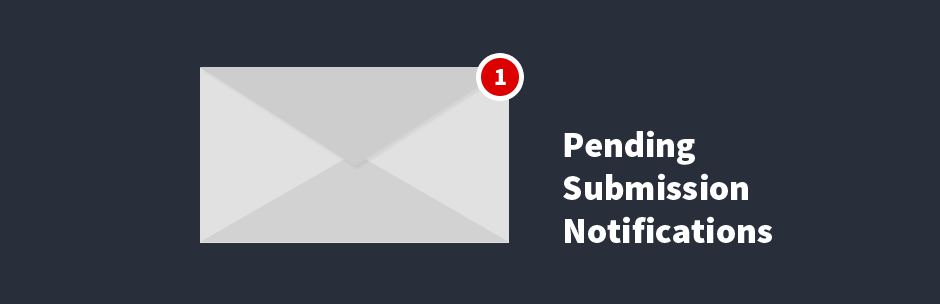
<style>
.page{position:relative;width:940px;height:304px;background:#282f3b}
.page>*{position:absolute;margin:0}
.t1{font:24px "SourceSansPro-Black";color:#ffffff}
.t2{font:36px "SourceSansPro-Black";color:#ffffff}
</style>
<div class="page">
<p class="t1" style="left:495px;top:69px;width:11px;height:16px">1</p>
<p class="t2" style="left:563px;top:130px;width:209px;height:113px">Pending <br>Submission <br>Notifications</p>
</div>
